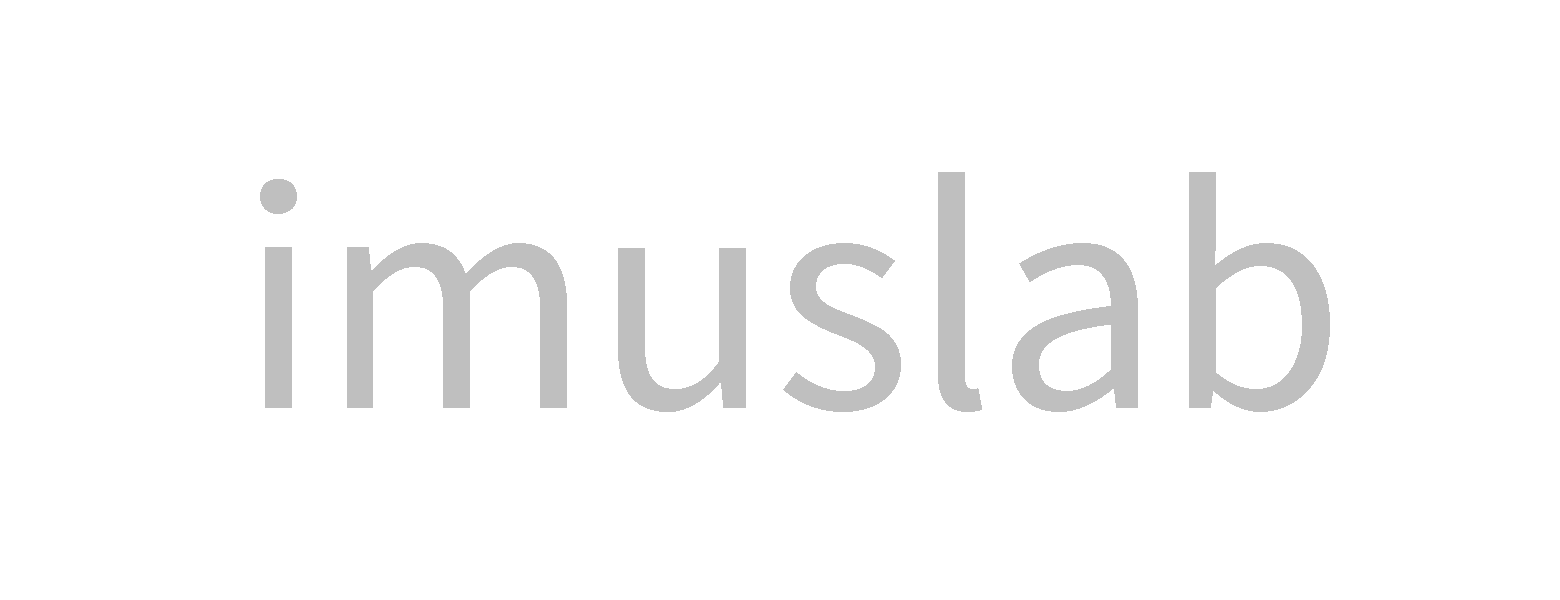
<style>
.page{position:relative;width:1560px;height:600px;background:#ffffff}
.page>*{position:absolute;margin:0}
.t1{font:296px "TaipeiSansTCBeta-Regular";color:#bfbfbf}
</style>
<div class="page">
<p class="t1" style="left:260px;top:172px;width:1070px;height:240px">imuslab</p>
</div>
